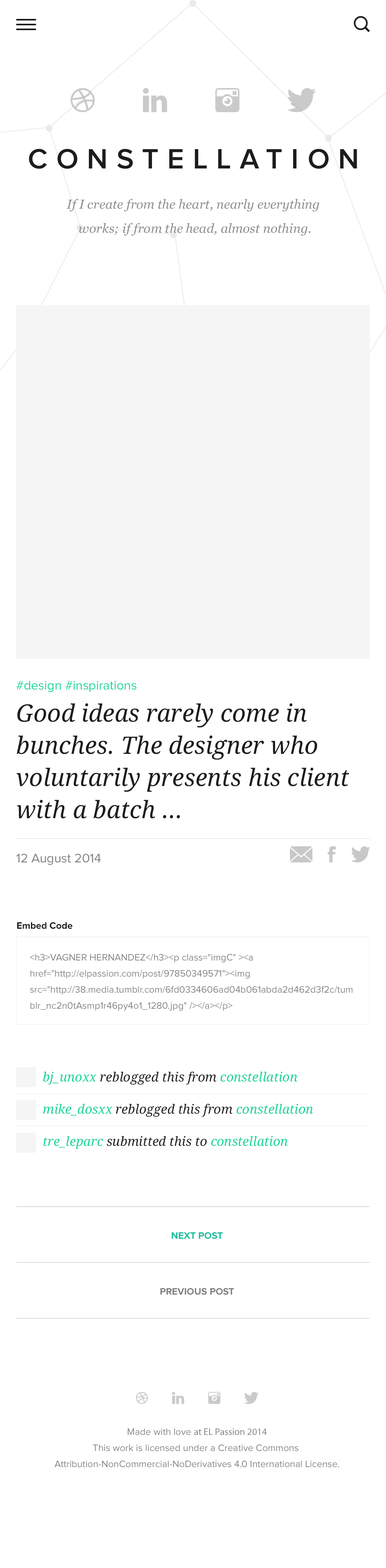
<style>
.page{position:relative;width:386px;height:1568px;background:#ffffff}
.page>*{position:absolute;margin:0}
.t1{font:28.9px "ProximaNova-Semibold";letter-spacing:0.3em;color:#1c1c1c;text-transform:uppercase}
.t2{font:12.9px/24.1px "Georgia-Italic";color:#8f8f8f}
.t3{font:24.1px/32.2px "DroidSerif-Italic";color:#1c1c1c}
.t4{font:12.9px/16.1px "ProximaNova-Regular";color:#15d698}
.t5{font:12.9px "ProximaNova-Regular";color:#818181}
.t6{font:9.7px "ProximaNova-Bold";color:#1c1c1c}
.t7{font:9.7px/16.1px "ProximaNova-Regular";color:#818181}
.t8{font:12.9px/32.2px "DroidSerif-Italic";color:#16d598}
.t9{font:12.9px/32.2px "DroidSerif-Italic";color:#1c1c1c}
.t10{font:9.6px "ProximaNova-Bold";color:#1abc9c;text-transform:uppercase}
.t11{font:9.6px "ProximaNova-Bold";color:#818181;text-transform:uppercase}
.t12{font:9.7px/16.1px "MyriadPro-Regular";color:#818181}
</style>
<div class="page">
<p class="t1" style="left:29px;top:149px;width:328px;height:20px">constellation</p>
<p class="t2" style="left:66px;top:199px;width:253px;height:37px;text-align:center">If I create from the heart, nearly everything <br>works; if from the head, almost nothing.</p>
<p class="t3" style="left:16px;top:681px;width:333px;height:138px"><span class="t4">#design #inspirations<br></span>Good ideas rarely come in bunches. The designer who voluntarily presents his client with a batch ...</p>
<p class="t5" style="left:16px;top:854px;width:85px;height:11px">12 August 2014</p>
<p class="t6" style="left:17px;top:922px;width:55px;height:7px">Embed Code</p>
<p class="t7" style="left:30px;top:954px;width:323px;height:57px">&lt;h3&gt;VAGNER HERNANDEZ&lt;/h3&gt;&lt;p class="imgC" &gt;&lt;a href="http://elpassion.com/post/97850349571"&gt;&lt;img src="http://38.media.tumblr.com/6fd0334606ad04b061abda2d462d3f2c/tumblr_nc2n0tAsmp1r46py4o1_1280.jpg" /&gt;&lt;/a&gt;&lt;/p&gt;</p>
<p class="t8" style="left:43px;top:1071px;width:270px;height:78px">bj_unoxx<span class="t9"> reblogged this from </span>constellation<br>mike_dosxx<span class="t9"> reblogged this from </span>constellation<br>tre_leparc<span class="t9"> submitted this to </span>constellation</p>
<p class="t10" style="left:172px;top:1232px;width:51px;height:7px">next post</p>
<p class="t11" style="left:160px;top:1288px;width:74px;height:7px">previous post</p>
<p class="t7" style="left:54px;top:1428px;width:285px;height:39px;text-align:center">Made with love <span class="t12">at EL Passion 2014<br></span>This work is licensed under a Creative Commons <br>Attribution-NonCommercial-NoDerivatives 4.0 International License.</p>
</div>
